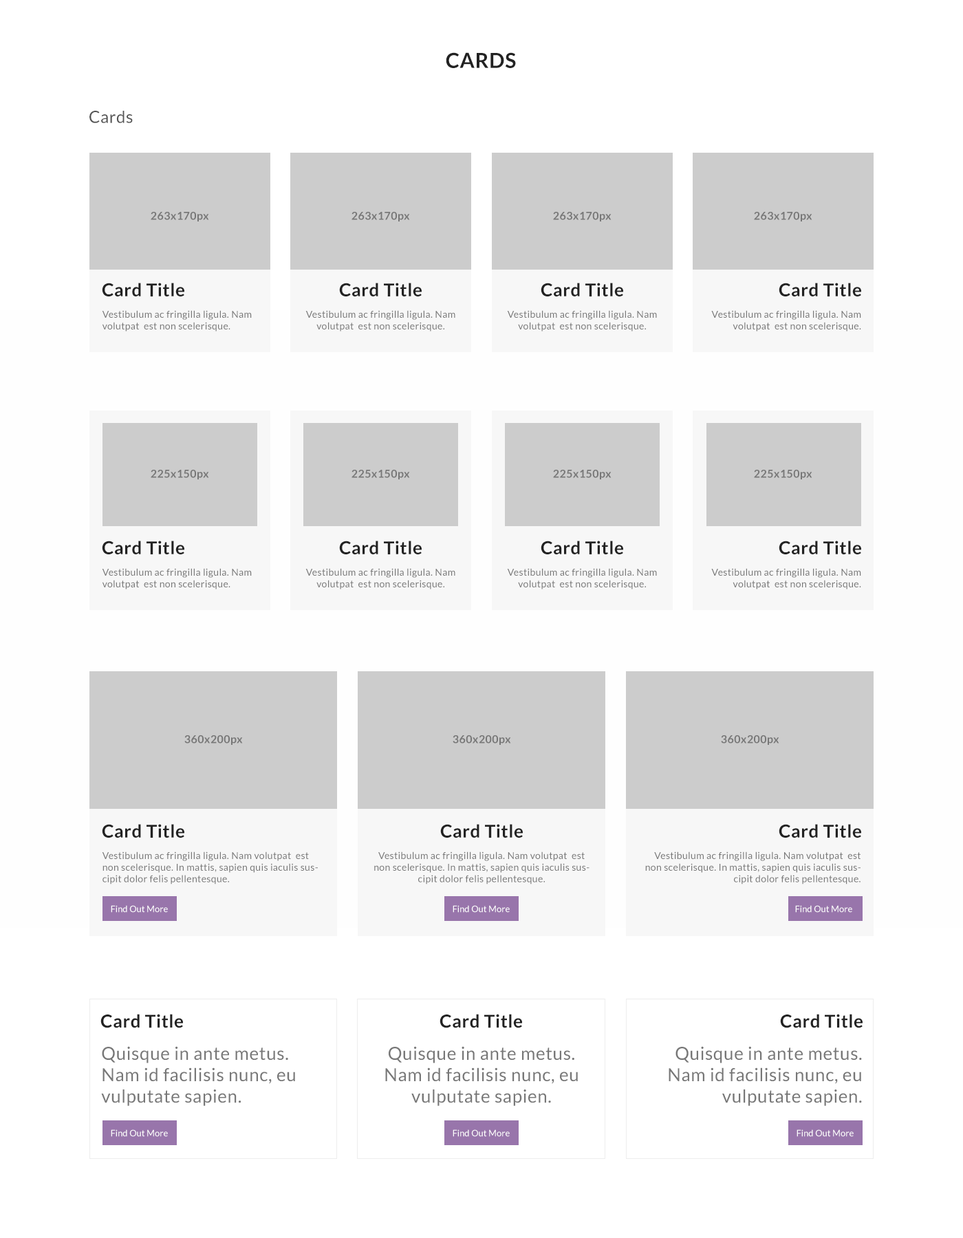
<style>
.page{position:relative;width:963px;height:1238px;background:#ffffff}
.page>*{position:absolute;margin:0}
.t1{font:20.6px "Lato-Bold";letter-spacing:0.025em;color:#222222}
.t2{font:16.5px "Lato-Regular";letter-spacing:0.025em;color:#555555}
.t3{font:11px "Lato-Bold";letter-spacing:0.025em;color:#777777}
.t4{font:17.9px "Lato-Bold";letter-spacing:0.025em;color:#222222}
.t5{font:9.6px "Lato-Regular";letter-spacing:0.025em;color:#777777}
.t6{font:8.9px "Lato-Regular";color:#ffffff}
.t7{font:17.9px "Lato-Regular";letter-spacing:0.025em;color:#777777}
</style>
<div class="page">
<p class="t1" style="left:446px;top:52px;width:70px;height:16px">CARDS</p>
<p class="t2" style="left:89px;top:111px;width:44px;height:12px">Cards</p>
<p class="t3" style="left:151px;top:211px;width:58px;height:10px">263x170px</p>
<p class="t3" style="left:352px;top:211px;width:58px;height:10px">263x170px</p>
<p class="t3" style="left:553px;top:211px;width:59px;height:10px">263x170px</p>
<p class="t3" style="left:754px;top:211px;width:58px;height:10px">263x170px</p>
<p class="t4" style="left:102px;top:283px;width:82px;height:13px">Card Title</p>
<p class="t4" style="left:339px;top:283px;width:83px;height:13px">Card Title</p>
<p class="t4" style="left:541px;top:283px;width:82px;height:13px">Card Title</p>
<p class="t4" style="left:779px;top:283px;width:82px;height:13px">Card Title</p>
<p class="t5" style="left:102px;top:310px;width:150px;height:22px">Vestibulum ac fringilla ligula. Nam volutpat  est non scelerisque.</p>
<p class="t5" style="left:305px;top:310px;width:150px;height:22px;text-align:center">Vestibulum ac fringilla ligula. Nam volutpat  est non scelerisque.</p>
<p class="t5" style="left:507px;top:310px;width:150px;height:22px;text-align:center">Vestibulum ac fringilla ligula. Nam volutpat  est non scelerisque.</p>
<p class="t5" style="left:711px;top:310px;width:150px;height:22px;text-align:right">Vestibulum ac fringilla ligula. Nam volutpat  est non scelerisque.</p>
<p class="t3" style="left:151px;top:469px;width:58px;height:10px">225x150px</p>
<p class="t3" style="left:352px;top:469px;width:58px;height:10px">225x150px</p>
<p class="t3" style="left:553px;top:469px;width:59px;height:10px">225x150px</p>
<p class="t3" style="left:754px;top:469px;width:58px;height:10px">225x150px</p>
<p class="t4" style="left:102px;top:541px;width:82px;height:13px">Card Title</p>
<p class="t4" style="left:339px;top:541px;width:83px;height:13px">Card Title</p>
<p class="t4" style="left:541px;top:541px;width:82px;height:13px">Card Title</p>
<p class="t4" style="left:779px;top:541px;width:82px;height:13px">Card Title</p>
<p class="t5" style="left:102px;top:568px;width:150px;height:22px">Vestibulum ac fringilla ligula. Nam volutpat  est non scelerisque.</p>
<p class="t5" style="left:305px;top:568px;width:150px;height:22px;text-align:center">Vestibulum ac fringilla ligula. Nam volutpat  est non scelerisque.</p>
<p class="t5" style="left:507px;top:568px;width:150px;height:22px;text-align:center">Vestibulum ac fringilla ligula. Nam volutpat  est non scelerisque.</p>
<p class="t5" style="left:711px;top:568px;width:150px;height:22px;text-align:right">Vestibulum ac fringilla ligula. Nam volutpat  est non scelerisque.</p>
<p class="t3" style="left:184px;top:735px;width:59px;height:10px">360x200px</p>
<p class="t3" style="left:453px;top:735px;width:58px;height:10px">360x200px</p>
<p class="t3" style="left:721px;top:735px;width:58px;height:10px">360x200px</p>
<p class="t4" style="left:102px;top:824px;width:82px;height:14px">Card Title</p>
<p class="t4" style="left:440px;top:824px;width:83px;height:14px">Card Title</p>
<p class="t4" style="left:779px;top:824px;width:82px;height:14px">Card Title</p>
<p class="t5" style="left:102px;top:852px;width:216px;height:33px">Vestibulum ac fringilla ligula. Nam volutpat  est non scelerisque. In mattis, sapien quis iaculis suscipit dolor felis pellentesque.</p>
<p class="t5" style="left:374px;top:852px;width:216px;height:33px;text-align:center">Vestibulum ac fringilla ligula. Nam volutpat  est non scelerisque. In mattis, sapien quis iaculis suscipit dolor felis pellentesque.</p>
<p class="t5" style="left:645px;top:852px;width:216px;height:33px;text-align:right">Vestibulum ac fringilla ligula. Nam volutpat  est non scelerisque. In mattis, sapien quis iaculis suscipit dolor felis pellentesque.</p>
<p class="t6" style="left:111px;top:905px;width:57px;height:8px">Find Out More</p>
<p class="t6" style="left:453px;top:905px;width:57px;height:8px">Find Out More</p>
<p class="t6" style="left:795px;top:905px;width:57px;height:8px">Find Out More</p>
<p class="t4" style="left:100px;top:1014px;width:83px;height:14px">Card Title</p>
<p class="t4" style="left:440px;top:1014px;width:82px;height:14px">Card Title</p>
<p class="t4" style="left:780px;top:1014px;width:83px;height:14px">Card Title</p>
<p class="t7" style="left:101px;top:1046px;width:194px;height:60px">Quisque in ante metus. Nam id facilisis nunc, eu vulputate sapien.</p>
<p class="t7" style="left:385px;top:1046px;width:193px;height:60px;text-align:center">Quisque in ante metus. Nam id facilisis nunc, eu vulputate sapien.</p>
<p class="t7" style="left:669px;top:1046px;width:193px;height:60px;text-align:right">Quisque in ante metus. Nam id facilisis nunc, eu vulputate sapien.</p>
<p class="t6" style="left:111px;top:1130px;width:57px;height:7px">Find Out More</p>
<p class="t6" style="left:453px;top:1130px;width:57px;height:7px">Find Out More</p>
<p class="t6" style="left:797px;top:1130px;width:57px;height:7px">Find Out More</p>
</div>
